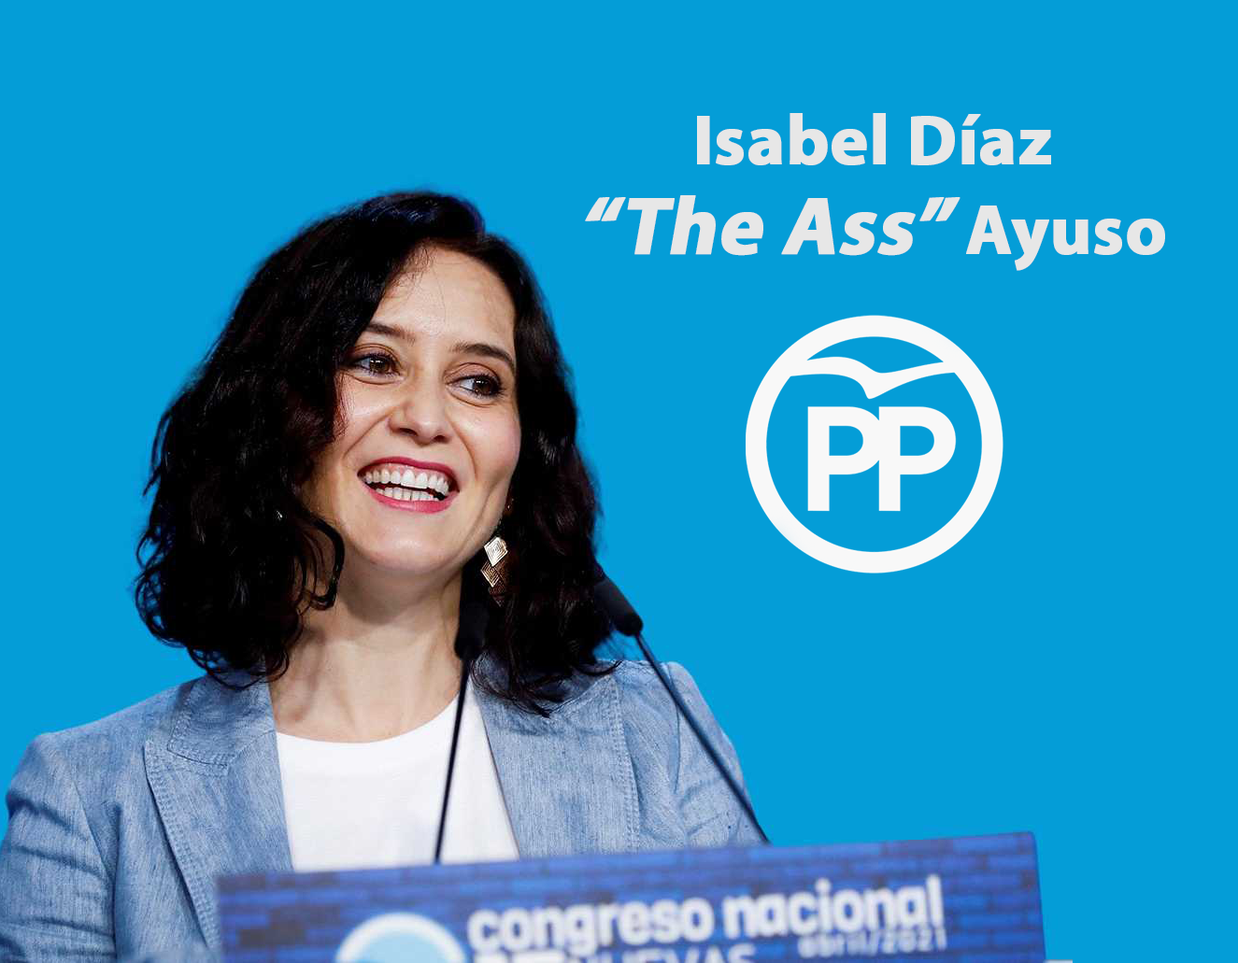
<style>
.page{position:relative;width:1238px;height:963px;background:#049dd7}
.page>*{position:absolute;margin:0}
.t1{font:70.4px "MyriadPro-Bold";color:#e7e7e7;font-weight:bold}
.t2{font:82.2px "MyriadPro-Bold";color:#e7e7e7;font-weight:bold;font-style:italic}
</style>
<div class="page">
<p class="t1" style="left:585px;top:113px;width:580px;height:158px;text-align:center">Isabel Díaz<br><span class="t2">“The Ass” </span>Ayuso</p>
</div>
